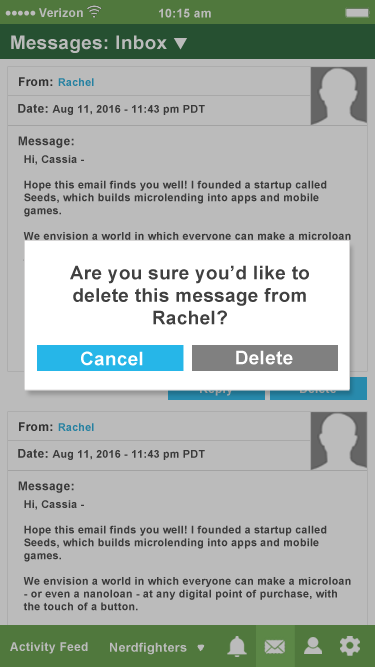
<style>
.page{position:relative;width:375px;height:667px;background:#bbbbbb}
.page>*{position:absolute;margin:0}
.t1{font:12px "Arial-BoldMT";letter-spacing:0.025em;color:#bbbbbb}
.t2{font:18.7px "Arial-BoldMT";letter-spacing:0.025em;color:#bbbbbb}
.t3{font:12px "Arial-BoldMT";letter-spacing:0.025em;color:#333333}
.t4{font:10.7px "Arial-BoldMT";letter-spacing:0.025em;color:#2681a1}
.t5{font:10.7px "Arial-BoldMT";letter-spacing:0.025em;color:#404040}
.t6{font:12px "Arial-BoldMT";letter-spacing:0.025em;color:#404040}
.t7{font:18.7px "Arial-BoldMT";letter-spacing:0.025em;color:#404040}
.t8{font:18.7px "Arial-BoldMT";letter-spacing:0.025em;color:#ffffff}
.t9{font:12px "Arial-BoldMT";letter-spacing:0.025em}
.t10{font:12.5px "Arial-BoldMT";letter-spacing:0.025em;color:#bbbbbb}
</style>
<div class="page">
<p class="t1" style="left:39px;top:8px;width:44px;height:9px">Verizon</p>
<p class="t1" style="left:159px;top:8px;width:52px;height:10px">10:15 am</p>
<p class="t2" style="left:11px;top:35px;width:156px;height:18px">Messages: Inbox</p>
<p class="t3" style="left:19px;top:77px;width:34px;height:9px">From:</p>
<p class="t4" style="left:58px;top:78px;width:36px;height:8px">Rachel</p>
<p class="t5" style="left:18px;top:104px;width:187px;height:11px"><span class="t6">Date: </span>Aug 11, 2016 - 11:43 pm PDT</p>
<p class="t6" style="left:18px;top:136px;width:56px;height:12px">Message:</p>
<p class="t7" style="left:70px;top:265px;width:239px;height:60px;text-align:center">Are you sure you’d like to delete this message from Rachel?</p>
<p class="t8" style="left:81px;top:351px;width:62px;height:15px">Cancel</p>
<p class="t8" style="left:236px;top:350px;width:57px;height:15px">Delete</p>
<p class="t9" style="left:200px;top:384px;width:33px;height:12px">Reply</p>
<p class="t3" style="left:19px;top:422px;width:34px;height:9px">From:</p>
<p class="t4" style="left:58px;top:423px;width:36px;height:8px">Rachel</p>
<p class="t5" style="left:18px;top:449px;width:187px;height:11px"><span class="t6">Date: </span>Aug 11, 2016 - 11:43 pm PDT</p>
<p class="t6" style="left:18px;top:481px;width:56px;height:12px">Message:</p>
<p class="t1" style="left:10px;top:642px;width:78px;height:12px">Activity Feed</p>
<p class="t10" style="left:110px;top:642px;width:77px;height:13px">Nerdfighters</p>
</div>
